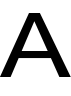
<style>
.page{position:relative;width:71px;height:96px;background:#ffffff}
.page>*{position:absolute;margin:0}
.t1{font:89.4px "MicrosoftSansSerif";color:#010101;scale:1.19 1}
</style>
<div class="page">
<p class="t1" style="left:0px;top:13px;width:71px;height:64px">A</p>
</div>
